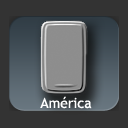
<style>
.page{position:relative;width:128px;height:128px;background:#333333}
.page>*{position:absolute;margin:0}
.t1{font:14px "TrebuchetMS";color:#ffffff}
</style>
<div class="page">
<p class="t1" style="left:40px;top:96px;width:52px;height:13px">América</p>
</div>
